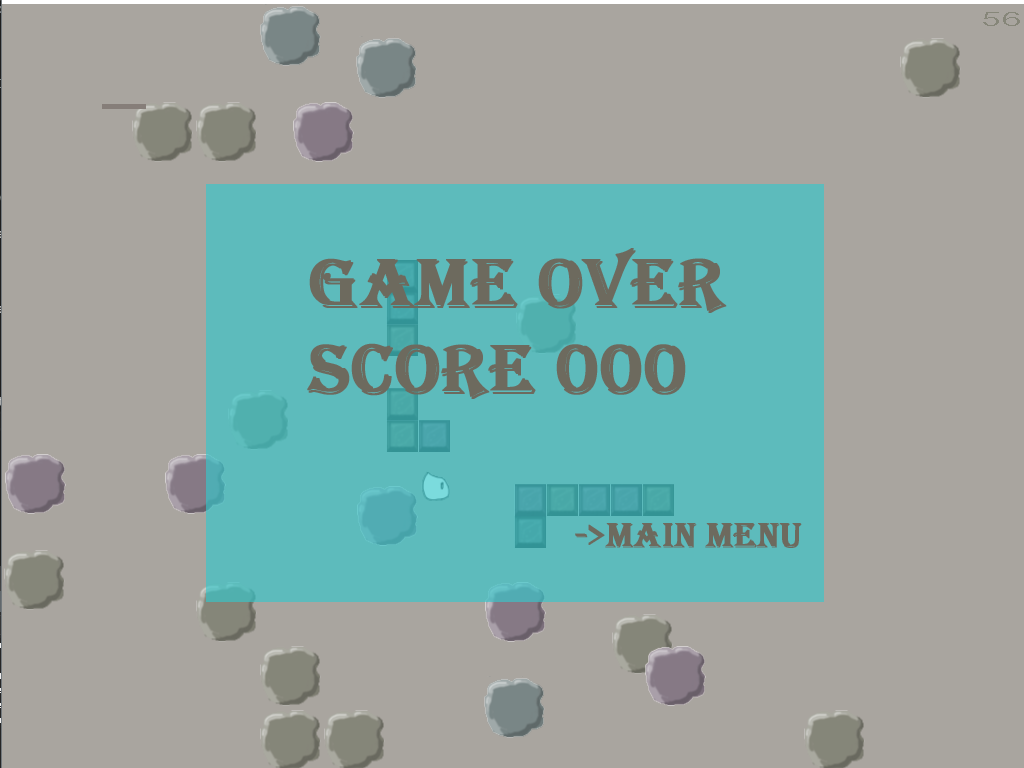
<style>
.page{position:relative;width:1024px;height:768px;background:#a9a59f}
.page>*{position:absolute;margin:0}
.t1{font:72px "Algerian";color:#6d6a5e;font-weight:bold}
.t2{font:36px "Algerian";color:#6d6a5e;font-weight:bold}
</style>
<div class="page">
<p class="t1" style="left:307px;top:248px;width:420px;height:151px">Game over<br>score 000</p>
<p class="t2" style="left:575px;top:523px;width:227px;height:25px">-&gt;main menu</p>
</div>
